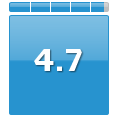
<style>
.page{position:relative;width:117px;height:117px;background:#2793cf}
.page>*{position:absolute;margin:0}
.t1{font:36px "Colaborate-Bold";color:#ffffff;text-transform:uppercase}
</style>
<div class="page">
<p class="t1" style="left:34px;top:49px;width:48px;height:22px">4.7</p>
</div>
